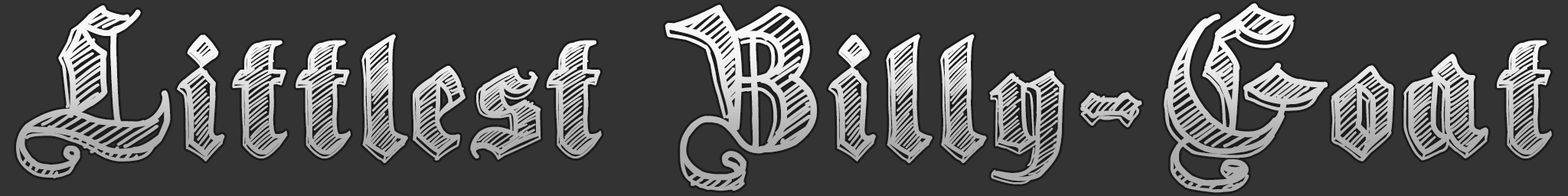
<style>
.page{position:relative;width:1568px;height:196px;background:#333333}
.page>*{position:absolute;margin:0}
.t1{font:208.5px "SketchGothicSchool"}
</style>
<div class="page">
<p class="t1" style="left:16px;top:3px;width:1536px;height:190px">Littlest Billy-Goat</p>
</div>
